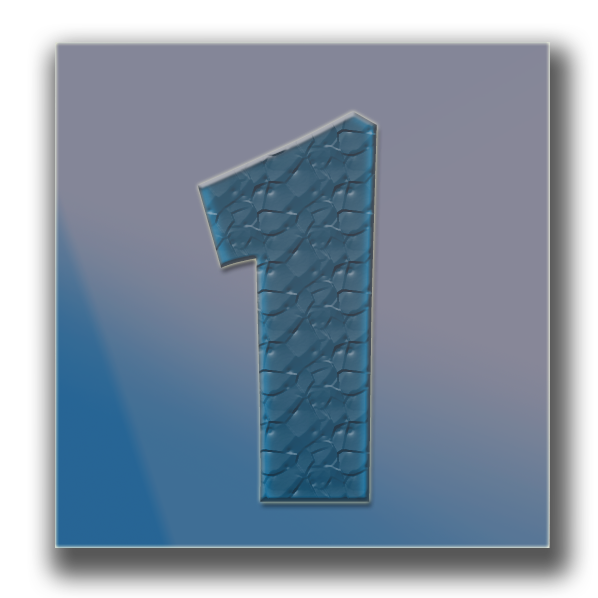
<style>
.page{position:relative;width:598px;height:598px}
.page>*{position:absolute;margin:0}
.t1{font:500px "ShowcardGothic-Reg";color:#375e75}
</style>
<div class="page">
<p class="t1" style="left:197px;top:111px;width:180px;height:391px">1</p>
</div>
